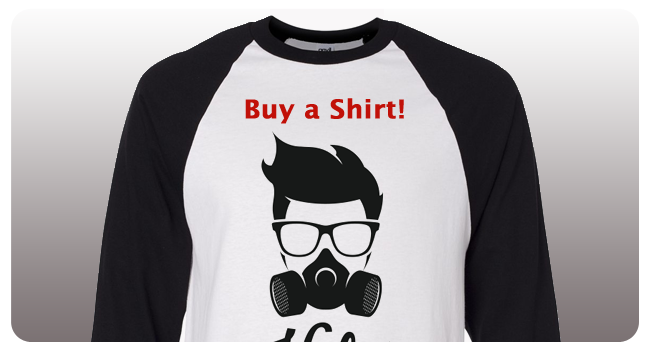
<style>
.page{position:relative;width:650px;height:350px}
.page>*{position:absolute;margin:0}
.t1{font:25.6px "LucidaGrande-Bold";color:#c11008;font-weight:bold;scale:1.03 1}
</style>
<div class="page">
<p class="t1" style="left:245px;top:98px;width:159px;height:26px">Buy a Shirt!</p>
</div>
